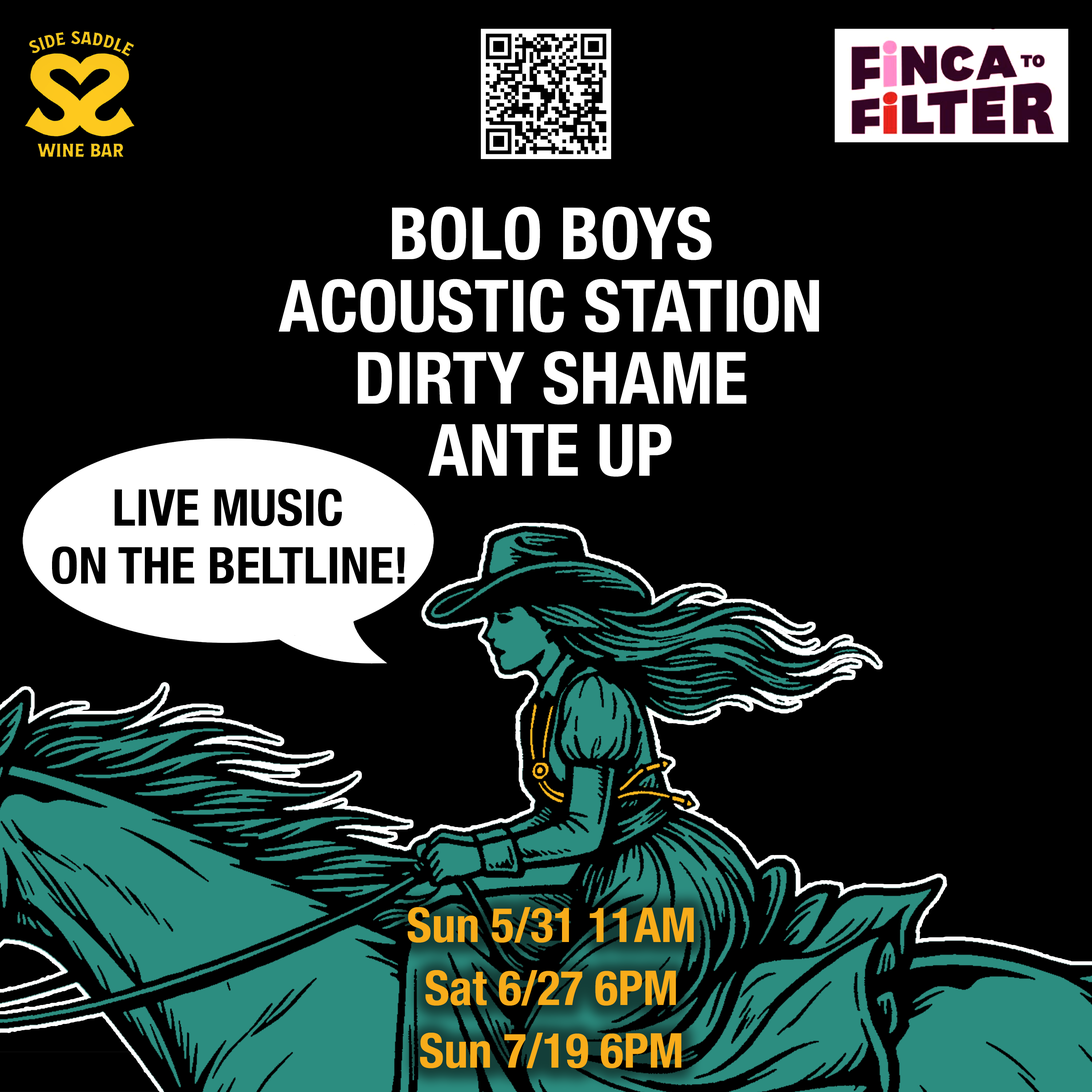
<style>
.page{position:relative;width:1092px;height:1092px;background:#000000}
.page>*{position:absolute;margin:0}
.t1{font:72.2px/52px "HelveticaNeue-CondensedBold";color:#ffffff}
.t2{font:50.8px "HelveticaNeue-CondensedBold";color:#000000}
.t3{font:50.9px "HelveticaNeue-CondensedBold";color:#000000}
.t4{font:48.1px/44px "HelveticaNeue-CondensedBold";color:#f8ac1a}
</style>
<div class="page">
<p class="t1" style="left:278px;top:206px;width:541px;height:271px;text-align:center">BOLO BOYS<br>ACOUSTIC STATION<br>DIRTY SHAME<br>ANTE UP</p>
<p class="t2" style="left:115px;top:488px;width:227px;height:38px">LIVE MUSIC</p>
<p class="t3" style="left:52px;top:546px;width:353px;height:38px">ON THE BELTLINE!</p>
<p class="t4" style="left:408px;top:907px;width:286px;height:161px;text-align:center">Sun 5/31 11AM<br>Sat 6/27 6PM<br>Sun 7/19 6PM</p>
</div>
